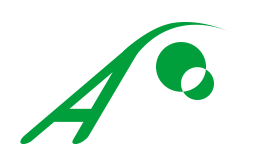
<style>
.page{position:relative;width:256px;height:160px;background:#ffffff}
.page>*{position:absolute;margin:0}
.t1{font:209.4px "OCR-A";letter-spacing:0.1em;color:#009f3c;scale:0.75 1}
</style>
<div class="page">
<p class="t1" style="left:20px;top:42px;width:123px;height:102px">A</p>
</div>
